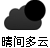
<style>
.page{position:relative;width:50px;height:48px;background:#ffffff}
.page>*{position:absolute;margin:0}
.t1{font:12px "OPPOSans-R";color:#000000}
</style>
<div class="page">
<p class="t1" style="left:2px;top:36px;width:46px;height:11px">晴间多云</p>
</div>
